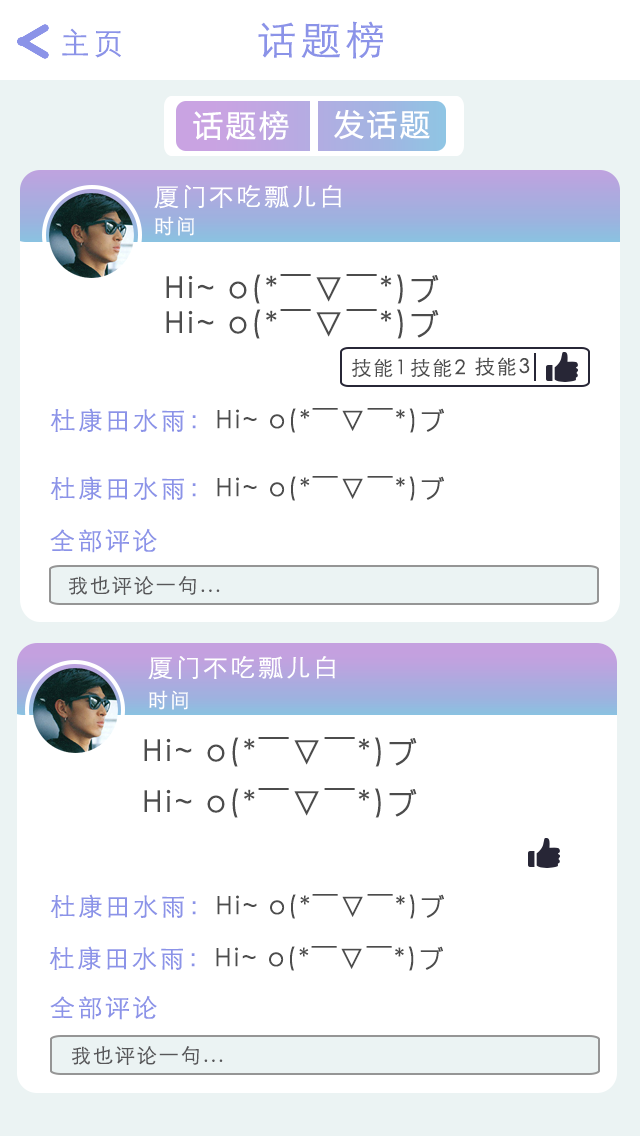
<style>
.page{position:relative;width:640px;height:1136px;background:#ffffff}
.page>*{position:absolute;margin:0}
.t1{font:30px "STXihei";letter-spacing:0.1em;color:#8b93e8}
.t2{font:40px "STXihei";letter-spacing:0.1em;color:#8b93e8}
.t3{font:30px "MicrosoftYaHei";letter-spacing:0.1em;color:#ffffff}
.t4{font:25px "STXihei";letter-spacing:0.1em;color:#ffffff}
.t5{font:20px "STXihei";letter-spacing:0.1em;color:#ffffff}
.t6{font:30px "STXihei";letter-spacing:0.1em;color:#4c4c4c}
.t7{font:20px "STXihei";letter-spacing:0.1em;color:#4c4c4c}
.t8{font:25px "STXihei";letter-spacing:0.1em;color:#4c4c4c}
.t9{font:25px "STXihei";letter-spacing:0.1em;color:#8b93e8}
.t10{font:20px "STXihei";letter-spacing:0.1em;color:#575759}
</style>
<div class="page">
<p class="t1" style="left:62px;top:28px;width:59px;height:30px">主页</p>
<p class="t2" style="left:258px;top:21px;width:125px;height:38px">话题榜</p>
<p class="t3" style="left:193px;top:110px;width:96px;height:31px">话题榜</p>
<p class="t3" style="left:334px;top:109px;width:96px;height:31px">发话题</p>
<p class="t4" style="left:154px;top:185px;width:187px;height:24px">厦门不吃瓢儿白</p>
<p class="t5" style="left:155px;top:216px;width:39px;height:20px">时间</p>
<p class="t6" style="left:166px;top:274px;width:273px;height:30px">Hi~ o(*￣▽￣*)ブ</p>
<p class="t6" style="left:166px;top:309px;width:273px;height:30px">Hi~ o(*￣▽￣*)ブ</p>
<p class="t7" style="left:351px;top:358px;width:51px;height:19px">技能1</p>
<p class="t7" style="left:410px;top:358px;width:55px;height:19px">技能2</p>
<p class="t7" style="left:475px;top:357px;width:55px;height:19px">技能3</p>
<p class="t8" style="left:50px;top:408px;width:394px;height:25px"><span class="t9">杜康田水雨：</span>Hi~ o(*￣▽￣*)ブ</p>
<p class="t8" style="left:50px;top:476px;width:394px;height:25px"><span class="t9">杜康田水雨：</span>Hi~ o(*￣▽￣*)ブ</p>
<p class="t9" style="left:50px;top:528px;width:107px;height:25px">全部评论</p>
<p class="t10" style="left:69px;top:576px;width:151px;height:19px">我也评论一句...</p>
<p class="t4" style="left:148px;top:656px;width:187px;height:24px">厦门不吃瓢儿白</p>
<p class="t5" style="left:149px;top:690px;width:39px;height:20px">时间</p>
<p class="t6" style="left:144px;top:737px;width:273px;height:30px">Hi~ o(*￣▽￣*)ブ</p>
<p class="t6" style="left:144px;top:788px;width:273px;height:30px">Hi~ o(*￣▽￣*)ブ</p>
<p class="t8" style="left:50px;top:894px;width:394px;height:25px"><span class="t9">杜康田水雨：</span>Hi~ o(*￣▽￣*)ブ</p>
<p class="t8" style="left:49px;top:946px;width:394px;height:25px"><span class="t9">杜康田水雨：</span>Hi~ o(*￣▽￣*)ブ</p>
<p class="t9" style="left:50px;top:995px;width:107px;height:25px">全部评论</p>
<p class="t10" style="left:72px;top:1046px;width:151px;height:19px">我也评论一句...</p>
</div>
